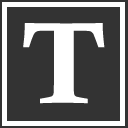
<style>
.page{position:relative;width:128px;height:128px;background:#333333}
.page>*{position:absolute;margin:0}
.t1{font:115.7px "CalisMTBol";color:#ffffff;scale:1.12 1}
</style>
<div class="page">
<p class="t1" style="left:23px;top:23px;width:82px;height:81px">T</p>
</div>
